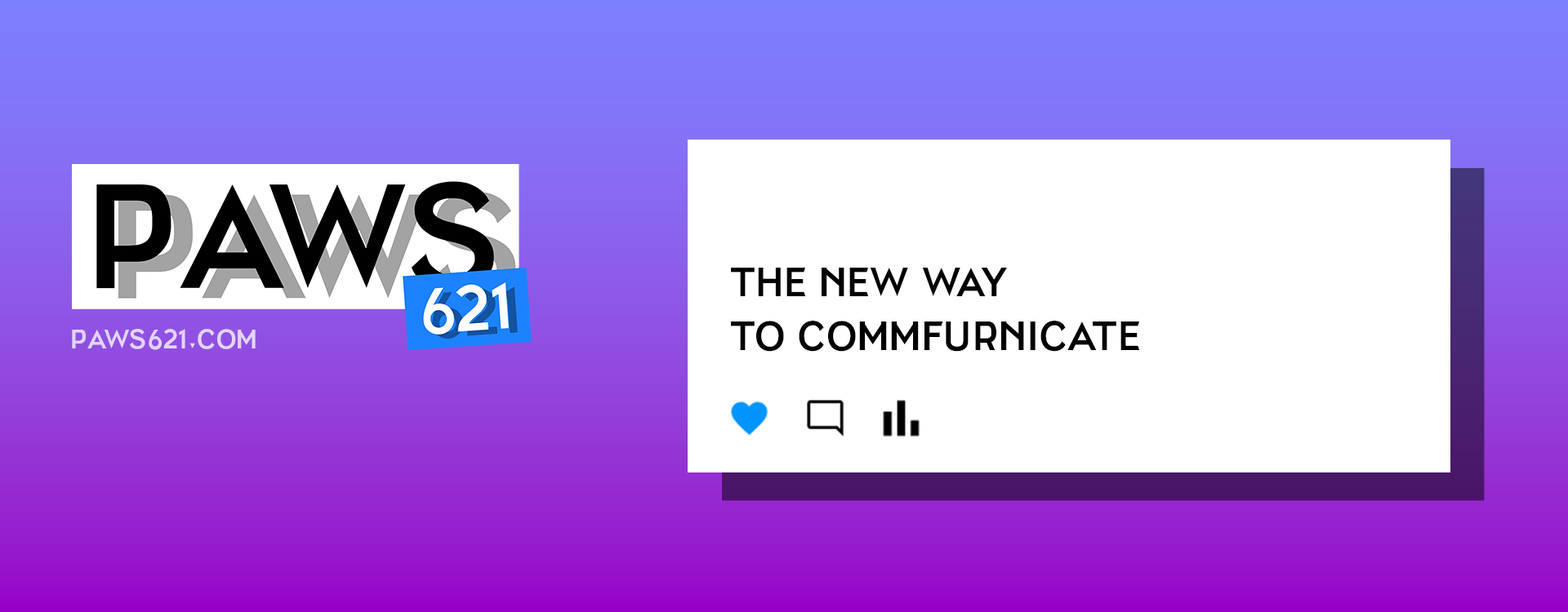
<style>
.page{position:relative;width:1568px;height:612px;background:#ffffff}
.page>*{position:absolute;margin:0}
.t1{font:40.8px/54.4px "bureaugroteskvivalettersfixed";color:#000000}
.t2{font:27.2px "bureaugroteskvivalettersfixed";color:#e2d5f7}
</style>
<div class="page">
<p class="t1" style="left:731px;top:268px;width:409px;height:84px">The new way <br>to commfurnicate</p>
<p class="t2" style="left:72px;top:329px;width:184px;height:21px">Paws621.com</p>
</div>
